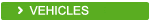
<style>
.page{position:relative;width:149px;height:22px;background:#5aad21}
.page>*{position:absolute;margin:0}
.t1{font:12px "ArialMT";color:#ffffff}
</style>
<div class="page">
<p class="t1" style="left:29px;top:5px;width:60px;height:10px">VEHICLES</p>
</div>
